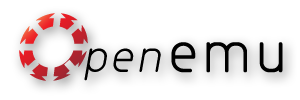
<style>
.page{position:relative;width:300px;height:100px;background:#ffffff}
.page>*{position:absolute;margin:0}
.t1{font:48px "GreyscaleBasic";letter-spacing:0.075em;color:#000000;font-style:italic}
.t2{font:60px "GreyscaleBasic";letter-spacing:0.075em;color:#000000;font-weight:bold}
</style>
<div class="page">
<p class="t1" style="left:84px;top:42px;width:199px;height:39px">pen<span class="t2">emu</span></p>
</div>
